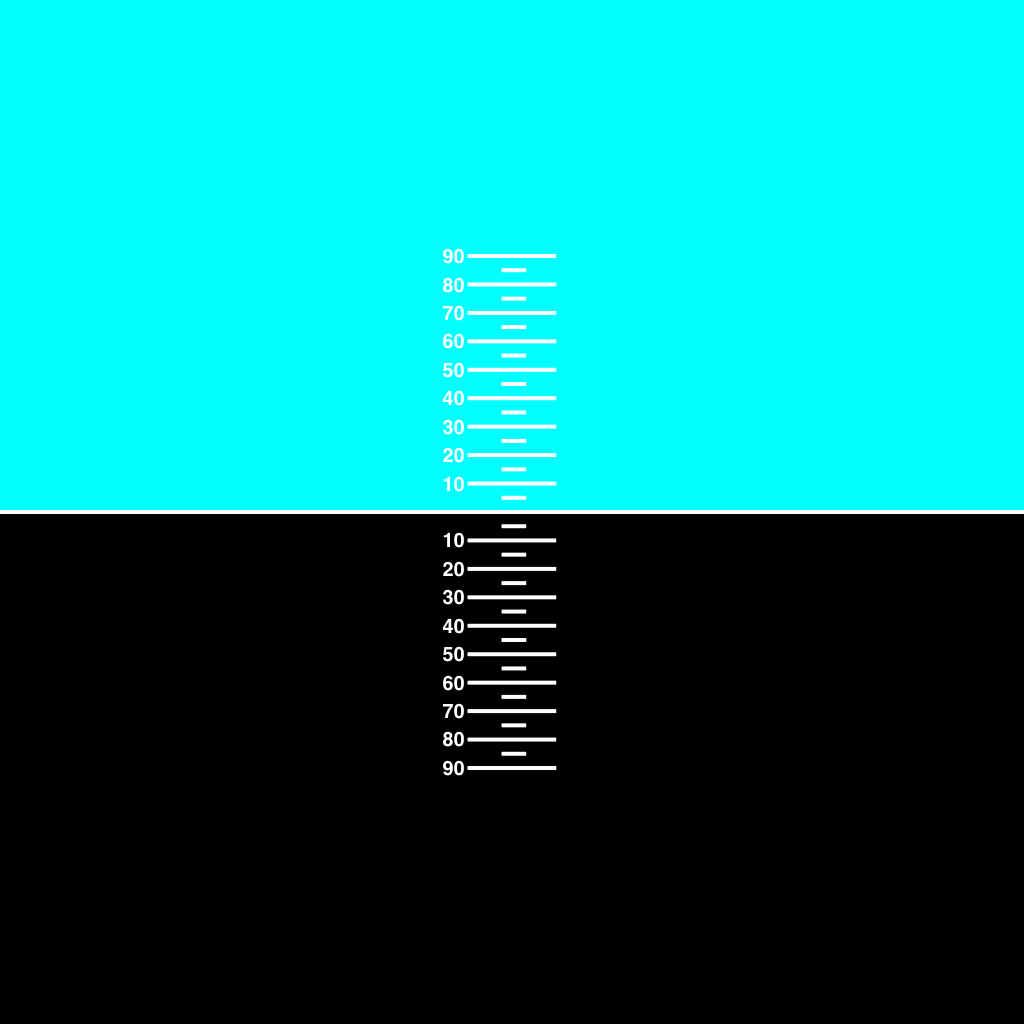
<style>
.page{position:relative;width:1024px;height:1024px;background:#00ffff}
.page>*{position:absolute;margin:0}
.t1{font:20px "Helvetica-Bold";color:#ffffff}
</style>
<div class="page">
<p class="t1" style="left:442px;top:248px;width:22px;height:16px">90</p>
<p class="t1" style="left:442px;top:277px;width:22px;height:16px">80</p>
<p class="t1" style="left:442px;top:305px;width:22px;height:16px">70</p>
<p class="t1" style="left:443px;top:333px;width:21px;height:16px">60</p>
<p class="t1" style="left:442px;top:362px;width:22px;height:16px">50</p>
<p class="t1" style="left:442px;top:390px;width:22px;height:16px">40</p>
<p class="t1" style="left:442px;top:419px;width:22px;height:16px">30</p>
<p class="t1" style="left:443px;top:447px;width:21px;height:16px">20</p>
<p class="t1" style="left:443px;top:476px;width:21px;height:16px">10</p>
<p class="t1" style="left:443px;top:532px;width:21px;height:16px">10</p>
<p class="t1" style="left:443px;top:561px;width:21px;height:16px">20</p>
<p class="t1" style="left:442px;top:589px;width:22px;height:16px">30</p>
<p class="t1" style="left:442px;top:618px;width:22px;height:16px">40</p>
<p class="t1" style="left:443px;top:646px;width:21px;height:16px">50</p>
<p class="t1" style="left:443px;top:675px;width:21px;height:16px">60</p>
<p class="t1" style="left:442px;top:703px;width:22px;height:16px">70</p>
<p class="t1" style="left:443px;top:731px;width:21px;height:16px">80</p>
<p class="t1" style="left:443px;top:760px;width:21px;height:16px">90</p>
</div>
